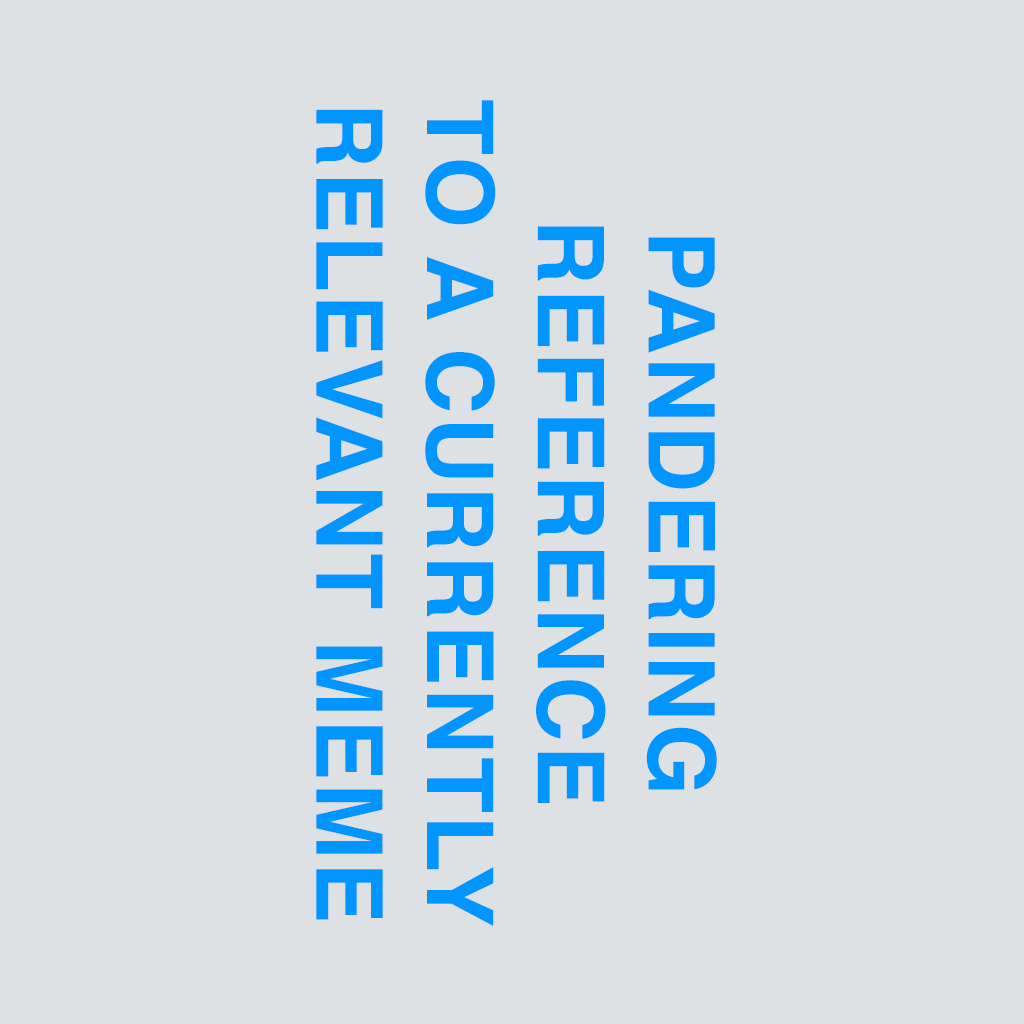
<style>
.page{position:relative;width:1024px;height:1024px;background:#dee1e3}
.page>*{position:absolute;margin:0}
.t1{font:92.3px "Helvetica-Bold";letter-spacing:0.025em;color:#0196ff}
</style>
<div class="page">
<p class="t1" style="left:316px;top:100px;width:401px;height:826px;text-align:center;rotate:90deg">PANDERING<br>REFERENCE<br>TO A CURRENTLY<br>RELEVANT MEME</p>
</div>
